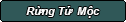
<style>
.page{position:relative;width:126px;height:22px;background:#305858}
.page>*{position:absolute;margin:0}
.t1{font:10.7px "Arial-BoldItalicMT";color:#ffffff}
</style>
<div class="page">
<p class="t1" style="left:26px;top:6px;width:74px;height:12px">Rừng Tử  Mộc</p>
</div>
